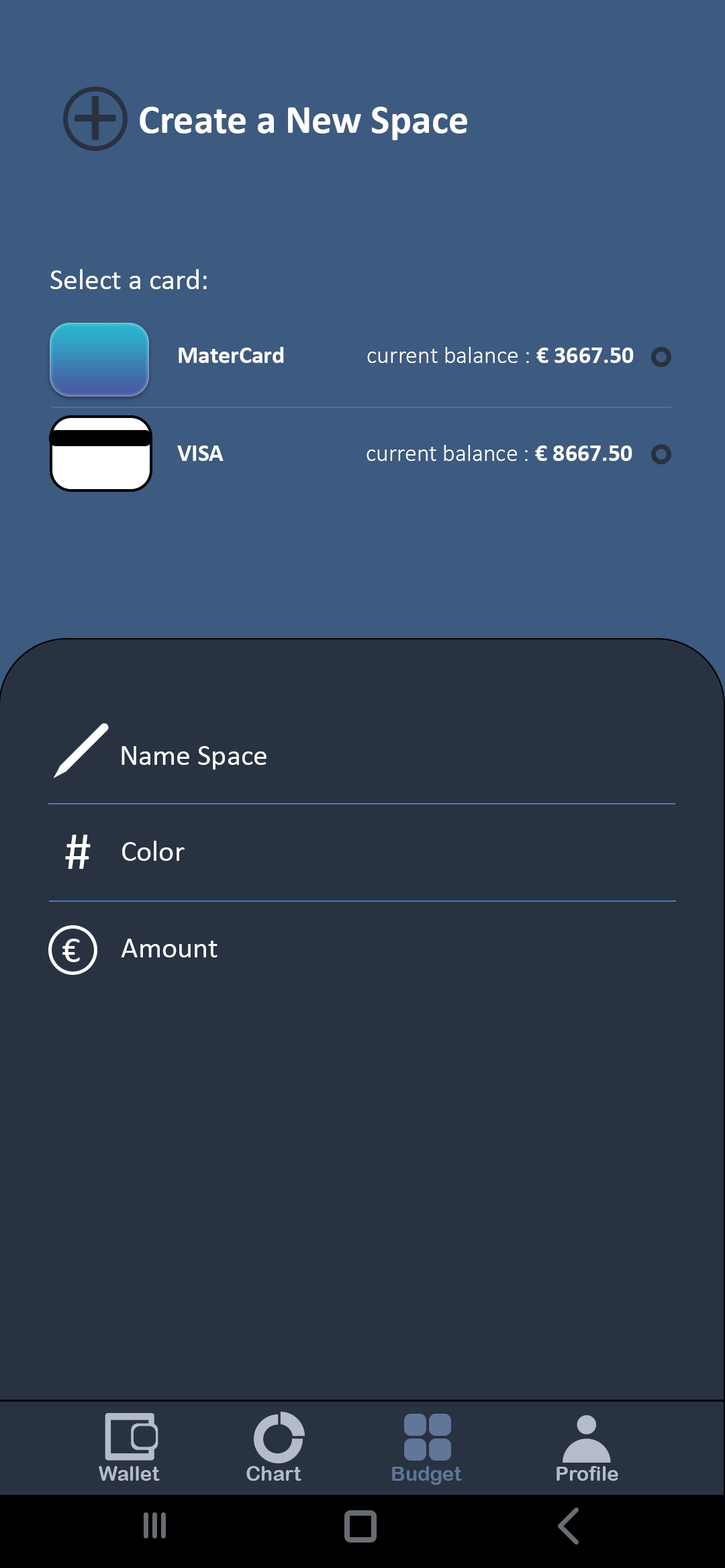
<style>
.page{position:relative;width:725px;height:1568px;background:#293241}
.page>*{position:absolute;margin:0}
.t1{font:96.5px "Calibri";color:#293241}
.t2{font:40.3px "Calibri-Bold";color:#ffffff}
.t3{font:29.5px "Calibri";color:#ffffff}
.t4{font:24.2px "Calibri-Light";color:#ffffff}
.t5{font:24.2px "Calibri-Bold";color:#ffffff}
.t6{font:53.7px "Calibri";color:#ffffff}
.t7{font:36.9px "Calibri";color:#ffffff}
.t8{font:20.1px "ArialRoundedMTBold";color:#b4bcc9}
.t9{font:20.1px "ArialRoundedMTBold";color:#617698}
</style>
<div class="page">
<p class="t1" style="left:74px;top:96px;width:42px;height:44px">+</p>
<p class="t2" style="left:140px;top:107px;width:327px;height:33px">Create a New Space</p>
<p class="t3" style="left:50px;top:269px;width:157px;height:20px">Select a card:</p>
<p class="t4" style="left:178px;top:347px;width:455px;height:16px"><span class="t5">MaterCard               </span>current balance : <span class="t5">€ 3667.50</span></p>
<p class="t4" style="left:177px;top:445px;width:455px;height:16px"><span class="t5">VISA                          </span>current balance : <span class="t5">€ 8667.50</span></p>
<p class="t3" style="left:121px;top:746px;width:145px;height:24px">Name Space</p>
<p class="t6" style="left:65px;top:835px;width:26px;height:34px">#</p>
<p class="t3" style="left:122px;top:841px;width:63px;height:20px">Color</p>
<p class="t7" style="left:62px;top:939px;width:18px;height:23px">€</p>
<p class="t3" style="left:121px;top:939px;width:96px;height:18px">Amount</p>
<p class="t8" style="left:99px;top:1466px;width:61px;height:15px">Wallet</p>
<p class="t8" style="left:246px;top:1466px;width:55px;height:15px">Chart</p>
<p class="t9" style="left:392px;top:1466px;width:70px;height:19px">Budget</p>
<p class="t8" style="left:556px;top:1466px;width:62px;height:15px">Profile</p>
</div>
